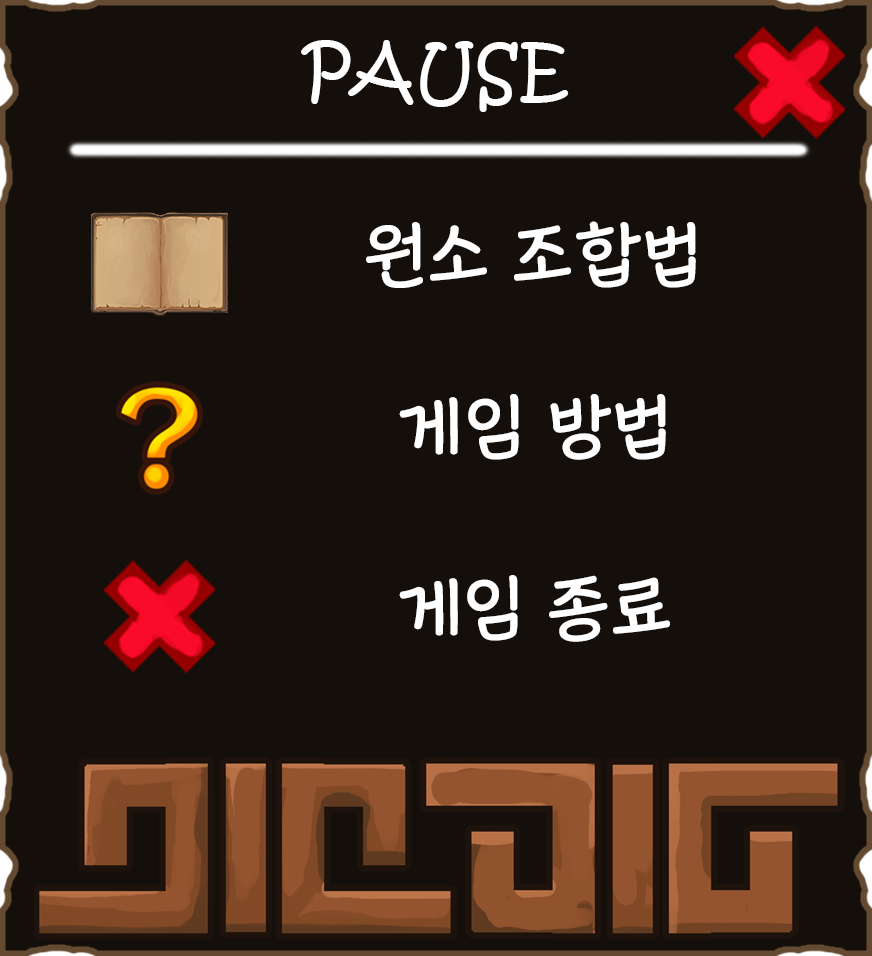
<style>
.page{position:relative;width:872px;height:956px;background:#140f0b}
.page>*{position:absolute;margin:0}
.t1{font:70px "KristenITC-Regular";color:#ffffff}
.t2{font:70px "KoreanMGRI-R";color:#ffffff}
</style>
<div class="page">
<p class="t1" style="left:301px;top:40px;width:268px;height:72px">PAUSE</p>
<p class="t2" style="left:366px;top:221px;width:330px;height:67px">원소 조합법</p>
<p class="t2" style="left:399px;top:394px;width:267px;height:66px">게임 방법</p>
<p class="t2" style="left:399px;top:575px;width:271px;height:67px">게임 종료</p>
</div>
